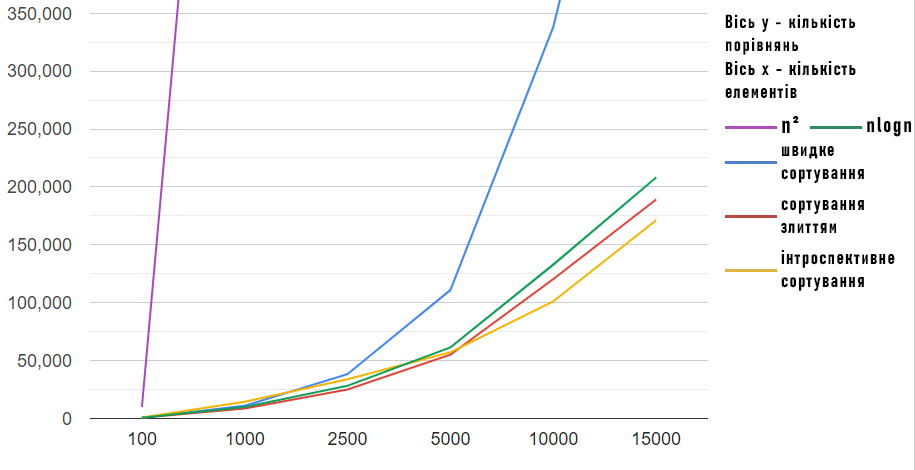
<style>
.page{position:relative;width:915px;height:470px;background:#ffffff}
.page>*{position:absolute;margin:0}
.t1{font:18.7px "Bahnschrift-BoldCondensed";letter-spacing:0.075em;color:#000000;font-style:italic}
.t2{font:24px "Bahnschrift-BoldCondensed";letter-spacing:0.075em;color:#000000;font-style:italic}
.t3{font:21.3px "Bahnschrift-BoldCondensed";letter-spacing:0.075em;color:#000000;font-style:italic}
</style>
<div class="page">
<p class="t1" style="left:725px;top:14px;width:130px;height:41px">Вісь y - кількість порівнянь</p>
<p class="t1" style="left:725px;top:61px;width:131px;height:38px">Вісь x - кількість елементів</p>
<p class="t2" style="left:782px;top:116px;width:17px;height:17px">n2</p>
<p class="t3" style="left:867px;top:116px;width:45px;height:21px">nlogn</p>
<p class="t1" style="left:781px;top:146px;width:83px;height:38px">швидке <br>сортування</p>
<p class="t1" style="left:781px;top:200px;width:83px;height:34px">сортування<br>злиттям</p>
<p class="t1" style="left:781px;top:250px;width:114px;height:42px">інтроспективне<br>сортування</p>
</div>
